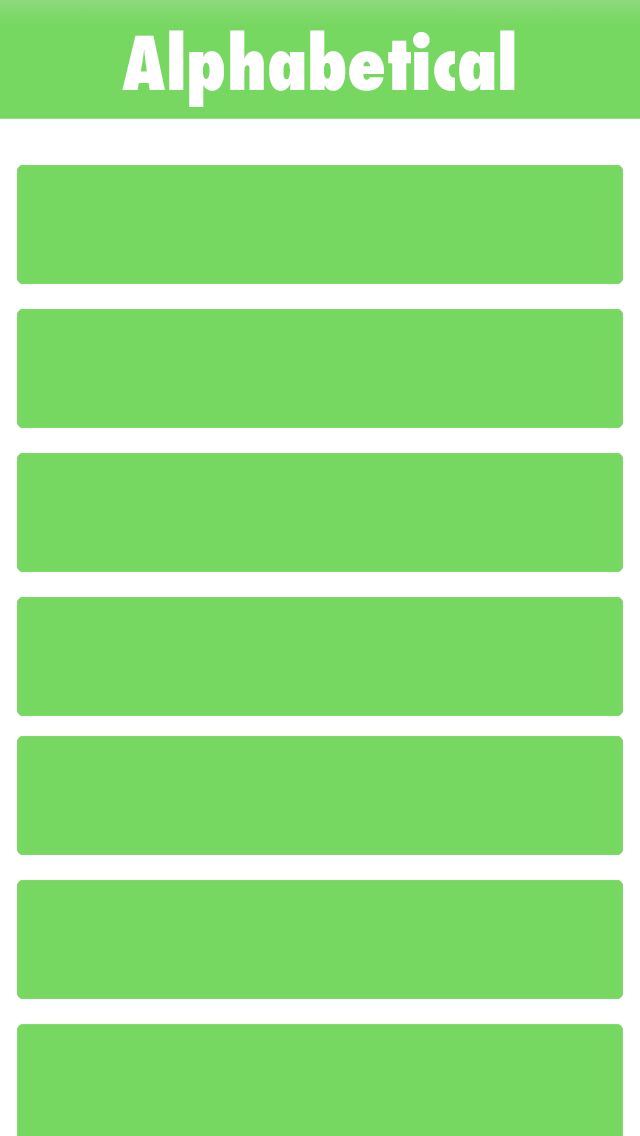
<style>
.page{position:relative;width:640px;height:1136px;background:#77d861}
.page>*{position:absolute;margin:0}
.t1{font:72px "Futura-CondensedExtraBold";color:#ffffff}
</style>
<div class="page">
<p class="t1" style="left:122px;top:30px;width:393px;height:77px">Alphabetical</p>
</div>
